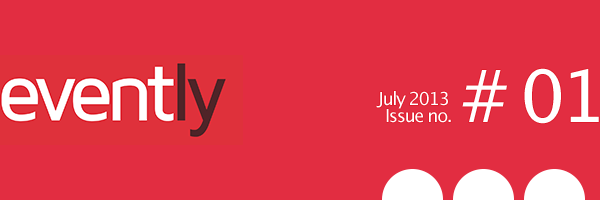
<style>
.page{position:relative;width:600px;height:200px;background:#e22d41}
.page>*{position:absolute;margin:0}
.t1{font:72px "LucidaGrande";letter-spacing:-0.075em;color:#ffffff}
.t2{font:18px "LucidaGrande";letter-spacing:-0.075em;color:#ffffff}
</style>
<div class="page">
<p class="t1" style="left:462px;top:68px;width:137px;height:56px"># 01</p>
<p class="t2" style="left:376px;top:91px;width:72px;height:18px">July 2013</p>
<p class="t2" style="left:386px;top:109px;width:65px;height:14px">Issue no.</p>
</div>
